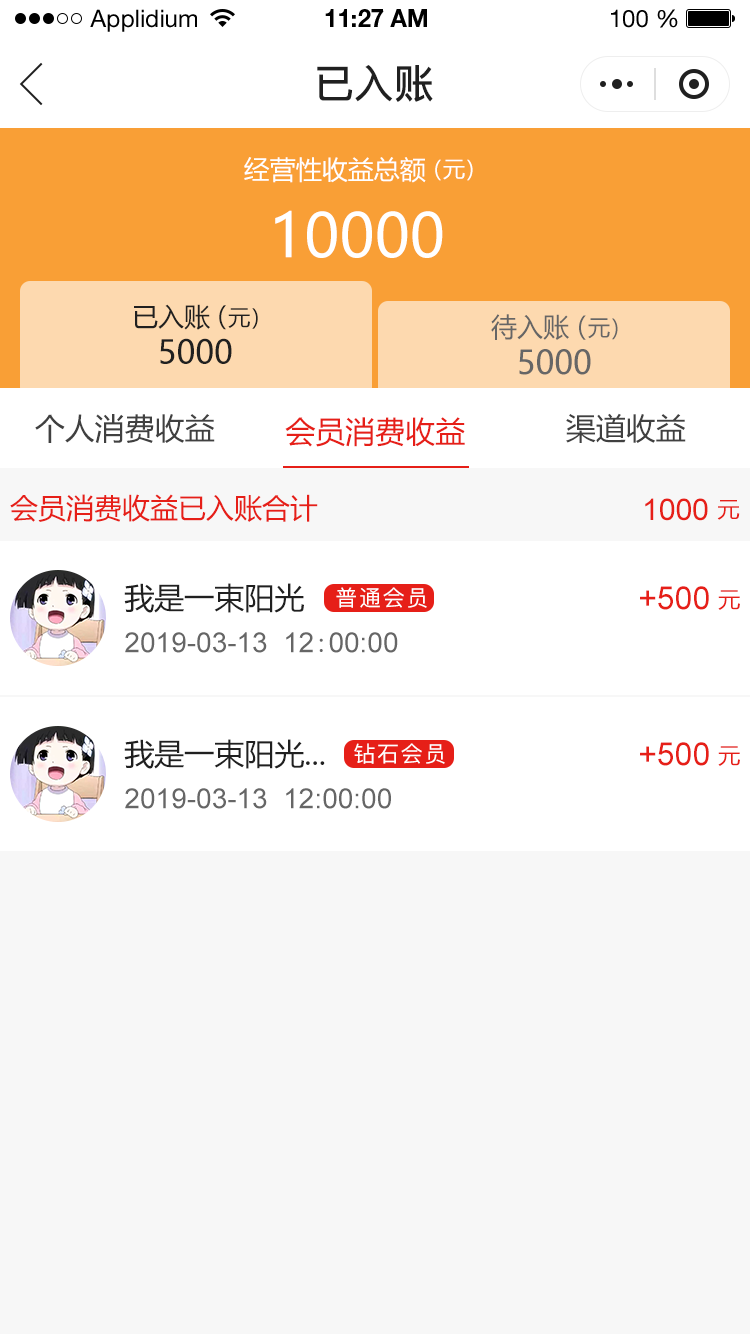
<style>
.page{position:relative;width:750px;height:1334px;background:#f7f7f7}
.page>*{position:absolute;margin:0}
.t1{font:24px "HelveticaNeueLTStd-Roman";color:#000000}
.t2{font:24px "HelveticaNeueLTStd-Bd";color:#000000}
.t3{font:40px "PingFang-SC-Bold";color:#202020;text-transform:uppercase}
.t4{font:26px "MicrosoftYaHei";color:#ffffff;text-transform:uppercase}
.t5{font:22px "MicrosoftYaHei";color:#ffffff;text-transform:uppercase}
.t6{font:60px "MicrosoftYaHei";color:#ffffff;text-transform:uppercase}
.t7{font:26px "MicrosoftYaHei";color:#202020;text-transform:uppercase}
.t8{font:22px "MicrosoftYaHei";color:#202020;text-transform:uppercase}
.t9{font:26.2px "MicrosoftYaHei";color:#666666;text-transform:uppercase}
.t10{font:22.2px "MicrosoftYaHei";color:#666666;text-transform:uppercase}
.t11{font:32px "MicrosoftYaHei";color:#202020;text-transform:uppercase}
.t12{font:32.2px "MicrosoftYaHei";color:#666666;text-transform:uppercase}
.t13{font:30px "MicrosoftYaHei";color:#404040;text-transform:uppercase}
.t14{font:30px "MicrosoftYaHei";color:#e61f18;text-transform:uppercase}
.t15{font:28px "MicrosoftYaHei";color:#e61f18;text-transform:uppercase}
.t16{font:30px "ArialMT";color:#e61f18;text-transform:uppercase}
.t17{font:22px "MicrosoftYaHei";color:#e61f18;text-transform:uppercase}
.t18{font:30px "MicrosoftYaHei";color:#202020;text-transform:uppercase}
.t19{font:22px "PingFang-SC-Medium";letter-spacing:0.08em;color:#ffffff}
.t20{font:32px "ArialMT";color:#e61f18;text-transform:uppercase}
.t21{font:28px "ArialMT";color:#666666;text-transform:uppercase}
.t22{font:28px "SimSun";color:#666666;text-transform:uppercase}
</style>
<div class="page">
<p class="t1" style="left:90px;top:9px;width:107px;height:23px">Applidium</p>
<p class="t2" style="left:325px;top:9px;width:102px;height:18px">11:27 AM</p>
<p class="t1" style="left:611px;top:9px;width:67px;height:19px">100 %</p>
<p class="t3" style="left:317px;top:65px;width:116px;height:37px">已入账</p>
<p class="t4" style="left:244px;top:157px;width:182px;height:26px">经营性收益总额</p>
<p class="t5" style="left:435px;top:159px;width:38px;height:22px">（元）</p>
<p class="t6" style="left:275px;top:210px;width:168px;height:48px">10000</p>
<p class="t7" style="left:134px;top:304px;width:76px;height:26px">已入账</p>
<p class="t8" style="left:219px;top:305px;width:39px;height:25px"><span class="t7">（</span>元）</p>
<p class="t9" style="left:491px;top:314px;width:78px;height:26px">待入账</p>
<p class="t10" style="left:579px;top:315px;width:39px;height:25px"><span class="t9">（</span>元）</p>
<p class="t11" style="left:160px;top:338px;width:72px;height:26px">5000</p>
<p class="t12" style="left:519px;top:349px;width:72px;height:26px">5000</p>
<p class="t13" style="left:35px;top:414px;width:180px;height:29px">个人消费收益</p>
<p class="t13" style="left:566px;top:413px;width:120px;height:30px">渠道收益</p>
<p class="t14" style="left:285px;top:417px;width:180px;height:30px">会员消费收益</p>
<p class="t15" style="left:10px;top:494px;width:308px;height:28px">会员消费收益已入账合计</p>
<p class="t16" style="left:645px;top:498px;width:63px;height:23px">1000</p>
<p class="t17" style="left:717px;top:500px;width:23px;height:20px">元</p>
<p class="t18" style="left:124px;top:583px;width:180px;height:30px">我是一束阳光</p>
<p class="t19" style="left:336px;top:587px;width:91px;height:21px">普通会员</p>
<p class="t20" style="left:640px;top:586px;width:69px;height:24px">+500</p>
<p class="t17" style="left:718px;top:590px;width:22px;height:20px">元</p>
<p class="t21" style="left:125px;top:632px;width:273px;height:21px">2019-03-13  12<span class="t22">:</span>00:00</p>
<p class="t18" style="left:124px;top:739px;width:201px;height:30px">我是一束阳光...</p>
<p class="t19" style="left:354px;top:743px;width:91px;height:21px">钻石会员</p>
<p class="t20" style="left:640px;top:742px;width:69px;height:24px">+500</p>
<p class="t17" style="left:718px;top:746px;width:22px;height:20px">元</p>
<p class="t21" style="left:125px;top:788px;width:266px;height:21px">2019-03-13  12:00:00</p>
</div>
